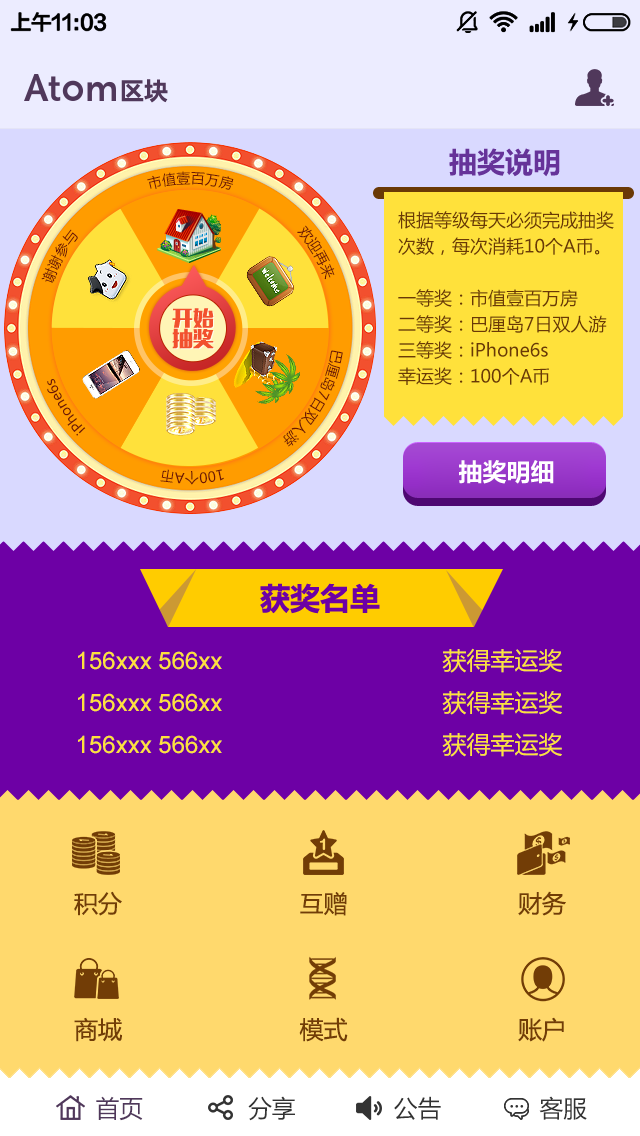
<style>
.page{position:relative;width:640px;height:1136px;background:#ffd96d}
.page>*{position:absolute;margin:0}
.t1{font:24px "Î¢ÈíÑÅºÚ83¹«ÉçÌØ±ð°æ\BBS.83GS.CN-B";color:#50385b}
.t2{font:28px "Î¢ÈíÑÅºÚ83¹«ÉçÌØ±ð°æ\BBS.83GS.CN-B";color:#663399}
.t3{font:18px/26px "MicrosoftYaHei";color:#6a3906}
.t4{font:20.5px/20.5px "MFLiHei_Noncommercial-Regular";color:#f2502e}
.t5{font:24px "Î¢ÈíÑÅºÚ83¹«ÉçÌØ±ð°æ\BBS.83GS.CN-B";color:#ffffff}
.t6{font:30px "Î¢ÈíÑÅºÚ83¹«ÉçÌØ±ð°æ\BBS.83GS.CN-B";color:#6d00a5}
.t7{font:24px/42px "ArialMT";color:#ffe13b}
.t8{font:24px/42px "MicrosoftYaHei";color:#ffe13b}
.t9{font:24px/63px "MicrosoftYaHei";color:#723d06}
.t10{font:24px "MicrosoftYaHei";color:#333333}
.t11{font:24px "MicrosoftYaHei";color:#50385b}
</style>
<div class="page">
<p class="t1" style="left:121px;top:79px;width:47px;height:24px">区块</p>
<p class="t2" style="left:449px;top:148px;width:111px;height:29px">抽奖说明</p>
<p class="t3" style="left:398px;top:211px;width:216px;height:174px">根据等级每天必须完成抽奖次数，每次消耗10个A币。<br><br>一等奖：市值壹百万房<br>二等奖：巴厘岛7日双人游<br>三等奖：iPhone6s<br>幸运奖：100个A币</p>
<p class="t4" style="left:172px;top:308px;width:42px;height:41px;text-align:center">开始<br>抽奖</p>
<p class="t5" style="left:459px;top:460px;width:95px;height:24px">抽奖明细</p>
<p class="t6" style="left:260px;top:583px;width:120px;height:31px">获奖名单</p>
<p class="t7" style="left:78px;top:648px;width:484px;height:109px;text-align:center">156xxx 566xx                                 <span class="t8">获得幸运奖<br></span>156xxx 566xx                                 <span class="t8">获得幸运奖<br></span>156xxx 566xx                                 <span class="t8">获得幸运奖</span></p>
<p class="t9" style="left:74px;top:891px;width:492px;height:151px;text-align:center">积分                         互赠                        财务<br><br>商城                         模式                        账户</p>
<p class="t10" style="left:96px;top:1096px;width:491px;height:25px"><span class="t11">首页</span>               分享              公告              客服</p>
</div>
